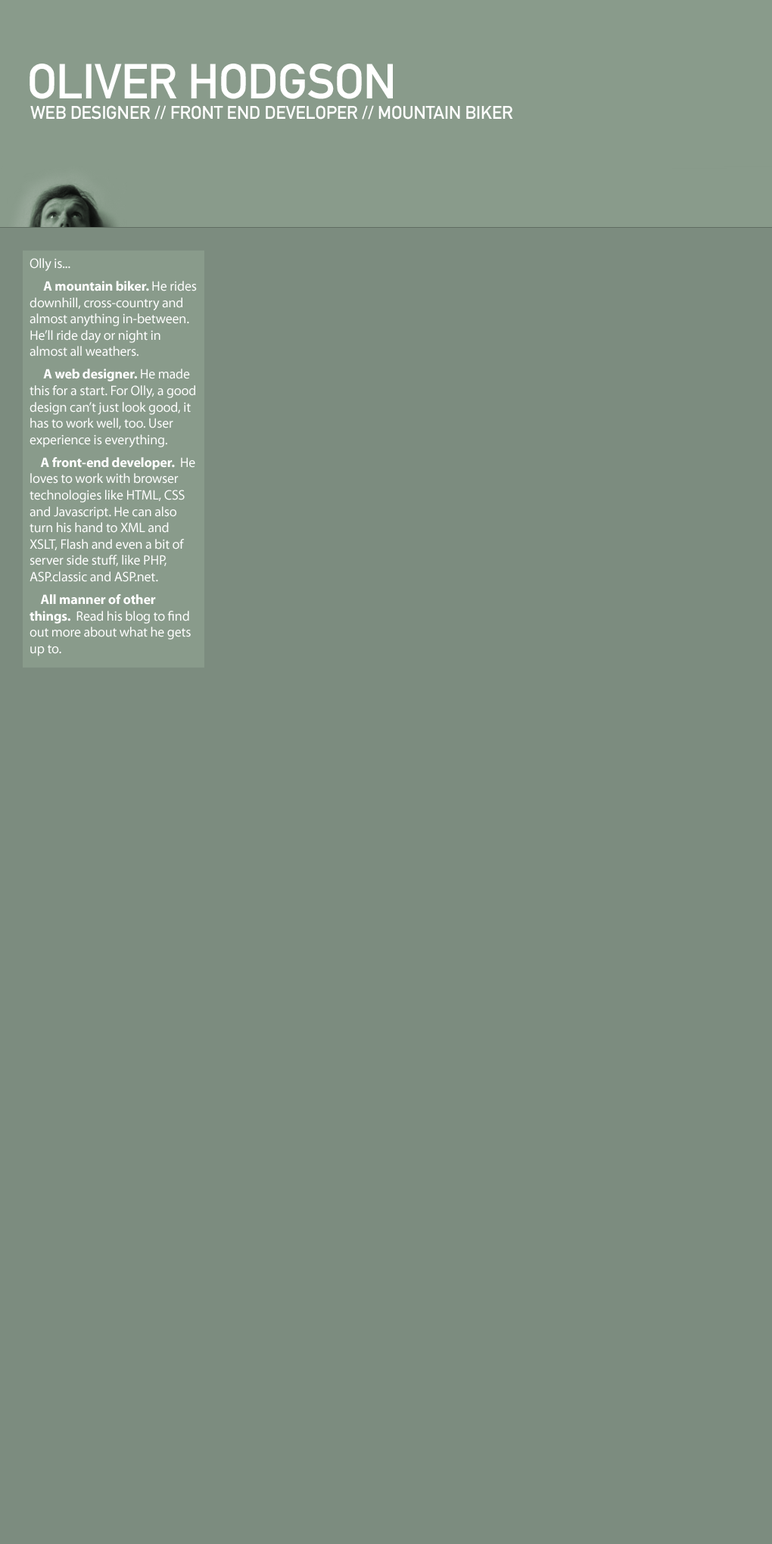
<style>
.page{position:relative;width:772px;height:1544px;background:#7c8c7f}
.page>*{position:absolute;margin:0}
.t1{font:48.4px "DINMittelschriftStd";letter-spacing:-0.01em;color:#ffffff;text-transform:uppercase}
.t2{font:18.2px "DINMittelschriftStd";letter-spacing:-0.01em;color:#ffffff;text-transform:uppercase}
.t3{font:13.6px "MyriadPro-Regular";letter-spacing:-0.01em;color:#ffffff}
.t4{font:13.6px/22.7px "MyriadPro-Bold";letter-spacing:-0.01em;color:#ffffff}
.t5{font:13.6px "MyriadPro-Bold";letter-spacing:-0.01em;color:#ffffff}
</style>
<div class="page">
<p class="t1" style="left:30px;top:64px;width:363px;height:35px">OLIVER HODGSON</p>
<p class="t2" style="left:30px;top:105px;width:483px;height:15px">Web designer // Front end developer // Mountain biker</p>
<p class="t3" style="left:30px;top:258px;width:167px;height:398px">Olly is... <br>     <span class="t4">A</span><span class="t5"> mountain biker. </span>He rides downhill, cross-country and almost anything in-between. He’ll ride day or night in almost all weathers.<br>     <span class="t4">A</span><span class="t5"> web designer.</span> He made this for a start. For Olly, a good design can’t just look good, it has to work well, too. User experience is everything.<br>    <span class="t4">A</span><span class="t5"> front-end developer. </span> He loves to work with browser technologies like HTML, CSS and Javascript. He can also turn his hand to XML and XSLT, Flash and even a bit of server side stuff, like PHP, ASP.classic and ASP.net.<br>    <span class="t4">A</span><span class="t5">ll manner of other things. </span> Read his blog to find out more about what he gets up to.</p>
</div>
